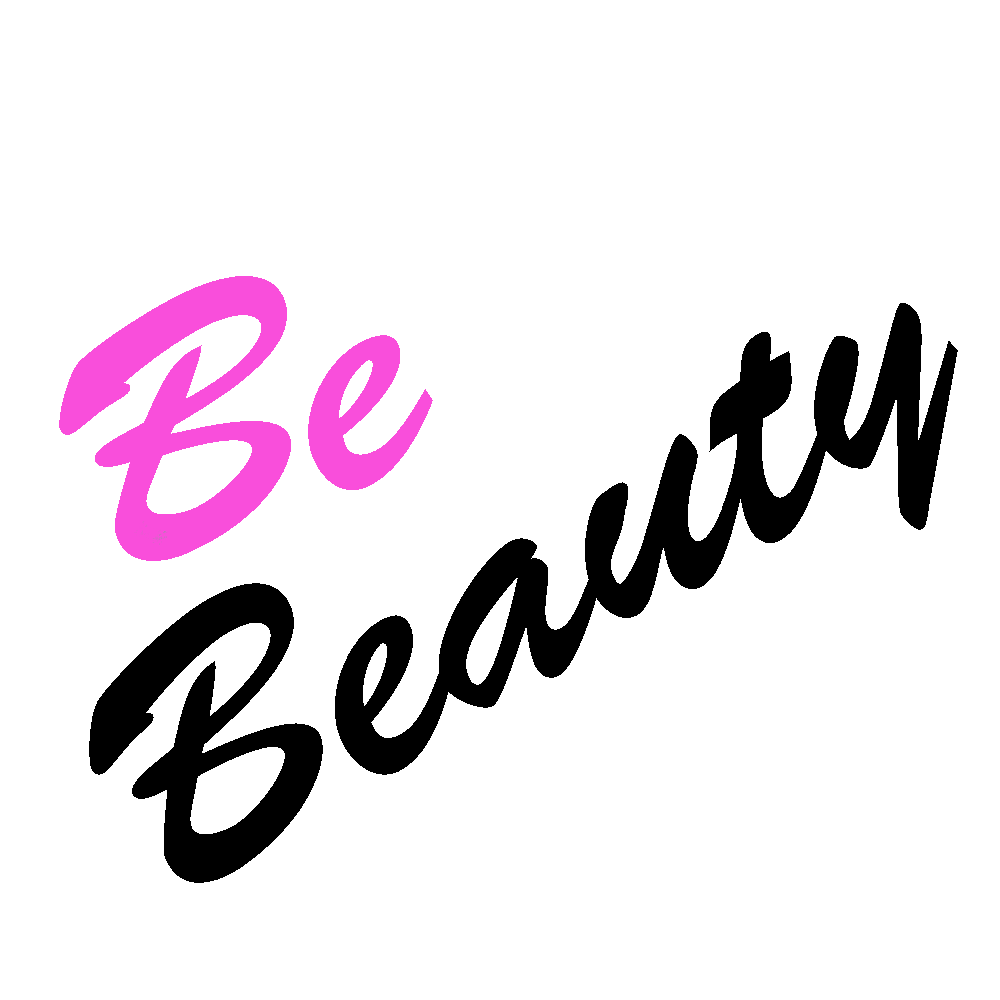
<style>
.page{position:relative;width:1000px;height:1000px;background:#ffffff}
.page>*{position:absolute;margin:0}
.t1{font:350px "BrushScriptStd";color:#f94edb}
.t2{font:350px "BrushScriptStd";color:#000000}
</style>
<div class="page">
<p class="t1" style="left:59px;top:276px;width:374px;height:285px;rotate:-21deg">Be</p>
<p class="t2" style="left:89px;top:303px;width:869px;height:580px;rotate:-32deg">Beauty</p>
</div>
